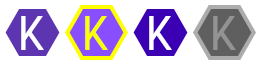
<style>
.page{position:relative;width:256px;height:64px;background:#ffffff}
.page>*{position:absolute;margin:0}
.t1{font:50.3px "Gidole-Regular";letter-spacing:-0.04em;color:#ffffff;font-weight:bold;scale:0.96 1}
.t2{font:50.3px "Gidole-Regular";letter-spacing:-0.04em;color:#fcff00;font-weight:bold;scale:0.96 1}
.t3{font:50.3px "Gidole-Regular";letter-spacing:-0.04em;color:#939393;font-weight:bold;scale:0.96 1}
</style>
<div class="page">
<p class="t1" style="left:21px;top:16px;width:23px;height:34px">K</p>
<p class="t2" style="left:85px;top:16px;width:23px;height:34px">K</p>
<p class="t1" style="left:149px;top:16px;width:23px;height:34px">K</p>
<p class="t3" style="left:213px;top:16px;width:23px;height:34px">K</p>
</div>
